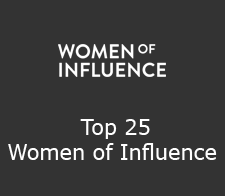
<style>
.page{position:relative;width:225px;height:196px;background:#333333}
.page>*{position:absolute;margin:0}
.t1{font:20.8px "Verdana";color:#ffffff}
</style>
<div class="page">
<p class="t1" style="left:8px;top:119px;width:209px;height:41px;text-align:center">Top 25<br>Women of Influence</p>
</div>
